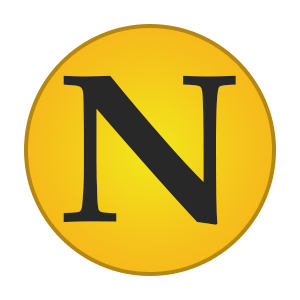
<style>
.page{position:relative;width:300px;height:300px;background:#ffffff}
.page>*{position:absolute;margin:0}
.t1{font:214.4px "Palatino-Bold";color:#282828;scale:1.05 1}
</style>
<div class="page">
<p class="t1" style="left:63px;top:75px;width:173px;height:150px">N</p>
</div>
